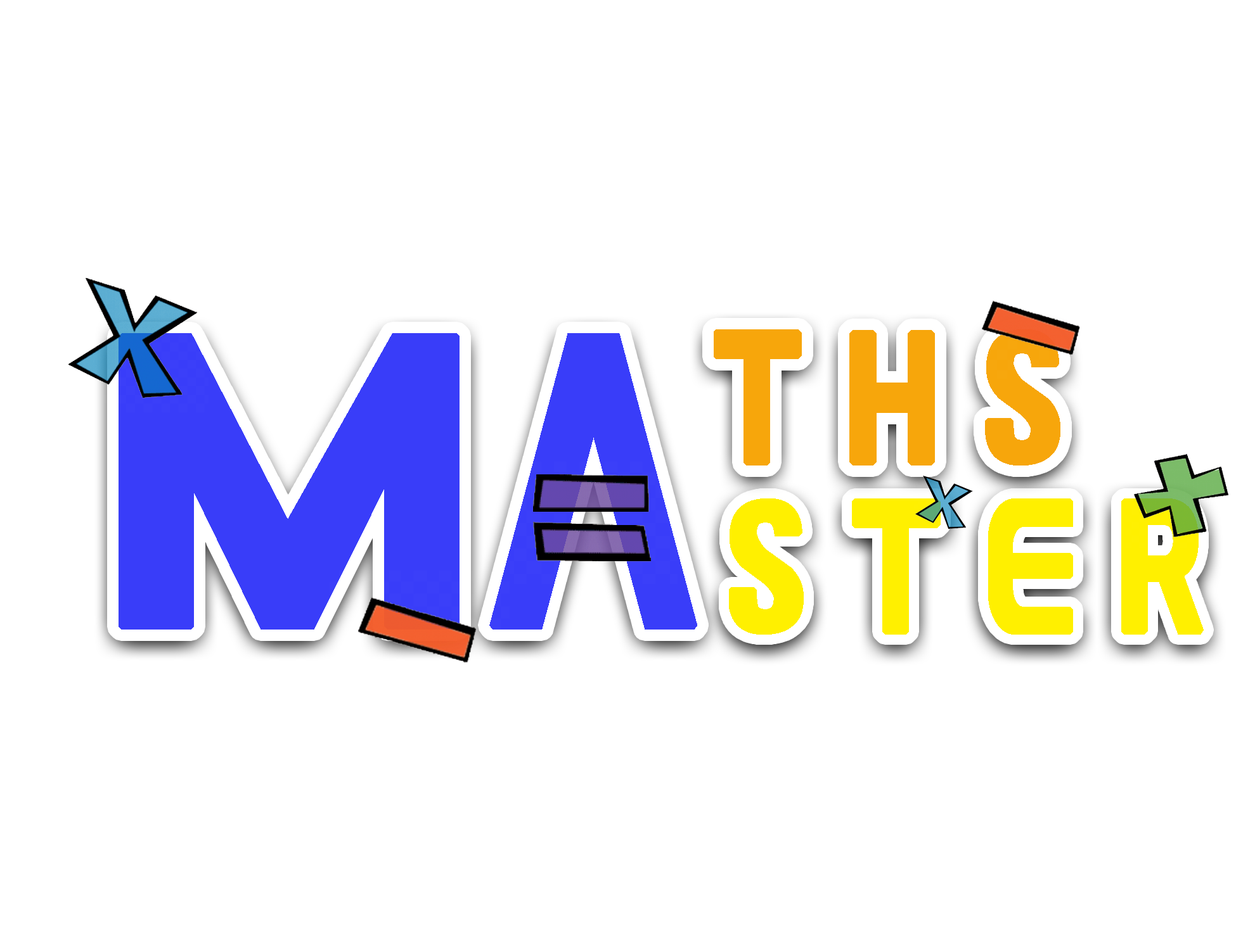
<style>
.page{position:relative;width:1255px;height:950px;background:#ffffff}
.page>*{position:absolute;margin:0}
.t1{font:160.9px "GAMECUBENDualSet";letter-spacing:0.2em;color:#f7a60b;font-weight:bold;scale:0.85 1}
.t2{font:361.7px "GAMECUBENDualSet";letter-spacing:-0.1em;color:#393df9;font-weight:bold;scale:0.85 1}
.t3{font:160.9px "GAMECUBENDualSet";letter-spacing:0.2em;color:#fff000;font-weight:bold;scale:0.85 1}
</style>
<div class="page">
<p class="t1" style="left:713px;top:329px;width:347px;height:137px">ths</p>
<p class="t2" style="left:118px;top:333px;width:579px;height:297px">Ma</p>
<p class="t3" style="left:729px;top:499px;width:474px;height:136px">ster</p>
</div>
